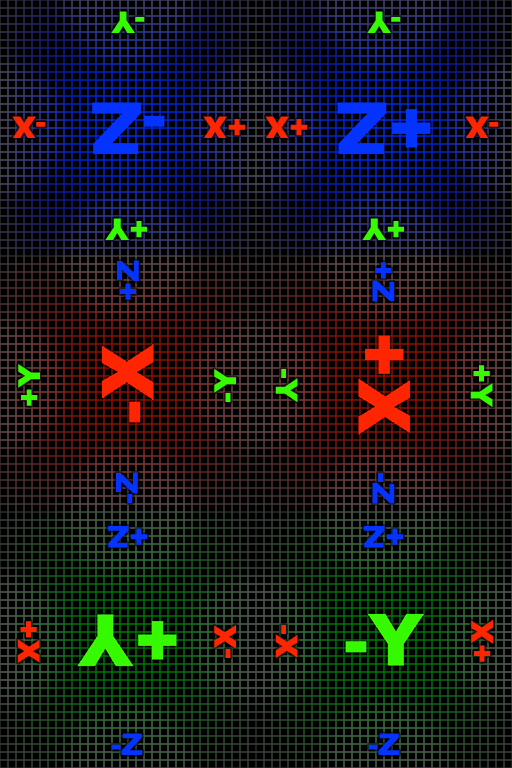
<style>
.page{position:relative;width:512px;height:768px;background:#000000}
.page>*{position:absolute;margin:0}
.t1{font:30px "Arial-Black";color:#36fa00}
.t2{font:30px "Arial-Black";color:#fe2600}
.t3{font:30px "Arial-Black";color:#0533ff}
</style>
<div class="page">
<p class="t1" style="left:111px;top:11px;width:34px;height:22px;rotate:-180deg">-Y</p>
<p class="t1" style="left:367px;top:11px;width:34px;height:22px;rotate:-180deg">-Y</p>
<p class="t2" style="left:12px;top:116px;width:34px;height:22px;rotate:-180deg">-X</p>
<p class="t2" style="left:203px;top:116px;width:42px;height:22px;rotate:-180deg">+X</p>
<p class="t2" style="left:265px;top:116px;width:42px;height:22px;rotate:-180deg">+X</p>
<p class="t2" style="left:465px;top:116px;width:34px;height:22px;rotate:-180deg">-X</p>
<p class="t1" style="left:105px;top:218px;width:42px;height:22px;rotate:-180deg">+Y</p>
<p class="t1" style="left:362px;top:218px;width:42px;height:22px;rotate:-180deg">+Y</p>
<p class="t3" style="left:117px;top:260px;width:22px;height:40px;rotate:-90deg">+Z</p>
<p class="t3" style="left:372px;top:262px;width:23px;height:40px;rotate:90deg">+Z</p>
<p class="t1" style="left:18px;top:364px;width:22px;height:42px;rotate:-90deg">+Y</p>
<p class="t1" style="left:470px;top:365px;width:23px;height:42px;rotate:90deg">+Y</p>
<p class="t1" style="left:214px;top:369px;width:22px;height:33px;rotate:-90deg">-Y</p>
<p class="t1" style="left:275px;top:369px;width:23px;height:33px;rotate:90deg">-Y</p>
<p class="t3" style="left:116px;top:472px;width:22px;height:31px;rotate:-90deg">-Z</p>
<p class="t3" style="left:372px;top:473px;width:23px;height:31px;rotate:90deg">-Z</p>
<p class="t3" style="left:108px;top:526px;width:39px;height:22px;rotate:180deg">+Z</p>
<p class="t3" style="left:364px;top:526px;width:39px;height:22px;rotate:180deg">+Z</p>
<p class="t2" style="left:17px;top:621px;width:23px;height:42px;rotate:90deg">+X</p>
<p class="t2" style="left:214px;top:625px;width:22px;height:33px;rotate:-90deg">-X</p>
<p class="t2" style="left:275px;top:625px;width:23px;height:33px;rotate:90deg">-X</p>
<p class="t2" style="left:471px;top:620px;width:22px;height:42px;rotate:-90deg">+X</p>
<p class="t3" style="left:111px;top:733px;width:32px;height:22px">-Z</p>
<p class="t3" style="left:368px;top:733px;width:32px;height:22px">-Z</p>
</div>
